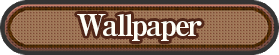
<style>
.page{position:relative;width:279px;height:55px}
.page>*{position:absolute;margin:0}
.t1{font:30px "RyuminPro-ExBold";letter-spacing:-0.08em;color:#fffff7}
</style>
<div class="page">
<p class="t1" style="left:77px;top:14px;width:125px;height:27px">Wallpaper</p>
</div>
